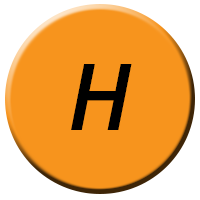
<style>
.page{position:relative;width:200px;height:200px;background:#f7941d}
.page>*{position:absolute;margin:0}
.t1{font:100px "SourceSansPro-SemiboldIt";color:#000000}
</style>
<div class="page">
<p class="t1" style="left:71px;top:64px;width:61px;height:66px">H</p>
</div>
